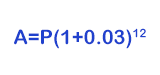
<style>
.page{position:relative;width:160px;height:75px;background:#ffffff}
.page>*{position:absolute;margin:0}
.t1{font:20px "ArialRoundedMTBold";color:#2041cd}
</style>
<div class="page">
<p class="t1" style="left:14px;top:28px;width:132px;height:21px">A=P(1+0.03)12</p>
</div>
